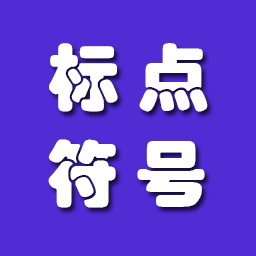
<style>
.page{position:relative;width:256px;height:256px;background:#512bd4}
.page>*{position:absolute;margin:0}
.t1{font:72px "STHupo";color:#ffffff}
</style>
<div class="page">
<p class="t1" style="left:49px;top:43px;width:159px;height:69px">标 点</p>
<p class="t1" style="left:48px;top:139px;width:157px;height:69px">符 号</p>
</div>
